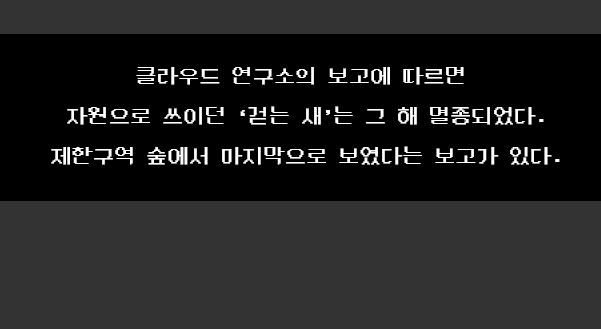
<style>
.page{position:relative;width:601px;height:329px;background:#333333}
.page>*{position:absolute;margin:0}
.t1{font:21.3px/20px "DungGeunMo";color:#ffffff}
</style>
<div class="page">
<p class="t1" style="left:51px;top:67px;width:509px;height:98px;text-align:center">클라우드 연구소의 보고에 따르면 <br><br>자원으로 쓰이던 ‘걷는 새’는 그 해 멸종되었다.<br><br>제한구역 숲에서 마지막으로 보였다는 보고가 있다.</p>
</div>
